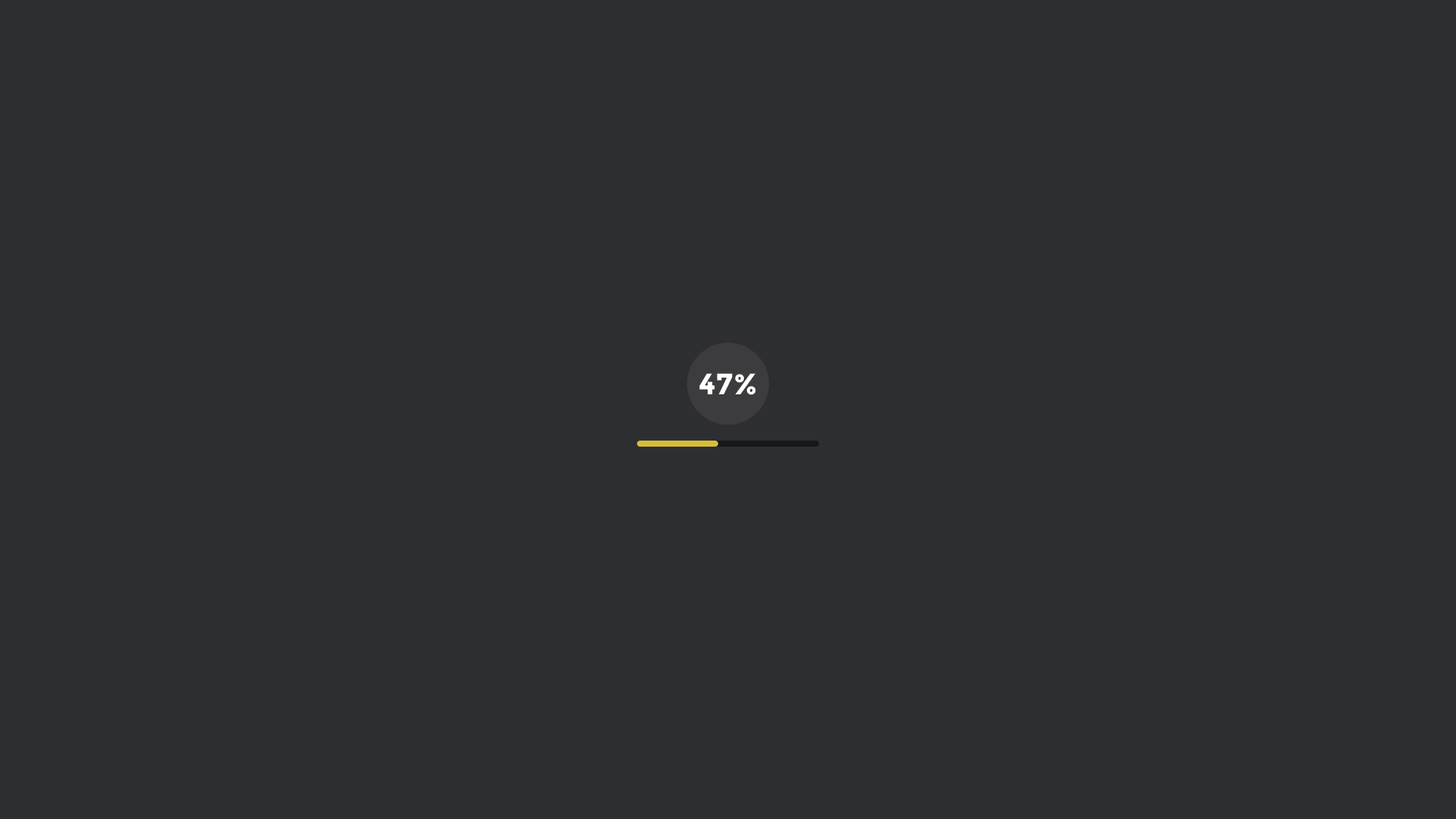
<style>
.page{position:relative;width:1456px;height:819px;background:#2d2e32}
.page>*{position:absolute;margin:0}
.t1{font:29.6px "Montserrat-Bold";color:#ffffff;text-transform:uppercase}
</style>
<div class="page">
<p class="t1" style="left:699px;top:373px;width:57px;height:22px">47%</p>
</div>
